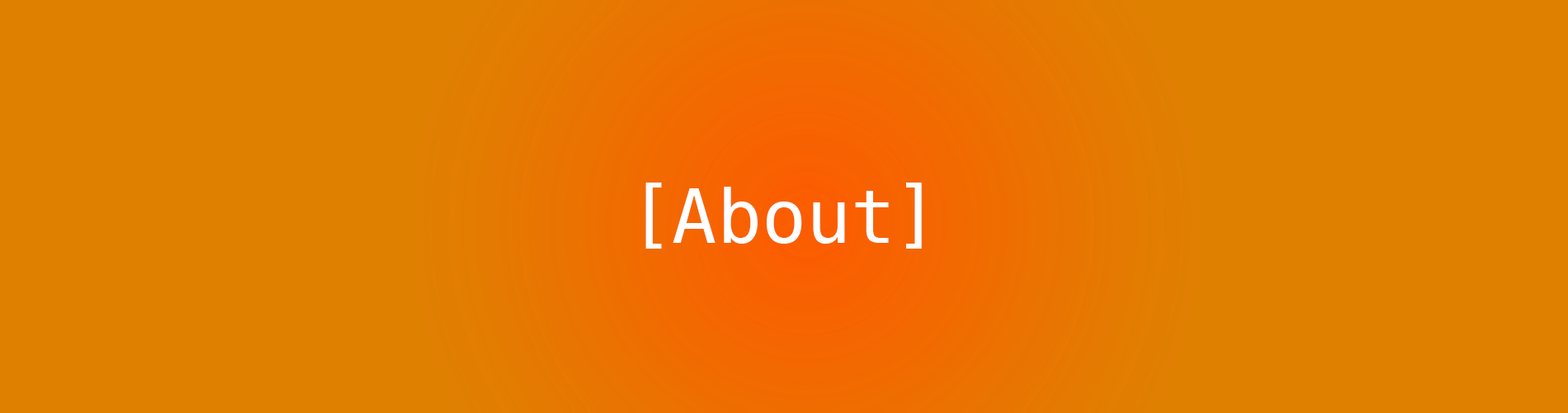
<style>
.page{position:relative;width:1568px;height:413px;background:#df8001}
.page>*{position:absolute;margin:0}
.t1{font:74.3px "Menlo-Regular";color:#ffffff}
</style>
<div class="page">
<p class="t1" style="left:645px;top:182px;width:277px;height:66px">[About]</p>
</div>
